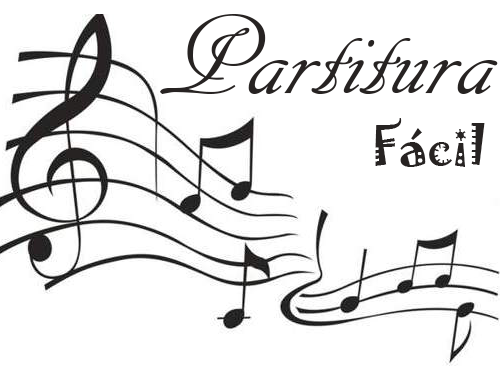
<style>
.page{position:relative;width:500px;height:368px;background:#ffffff}
.page>*{position:absolute;margin:0}
.t1{font:120px "ARDECODE";color:#272322}
.t2{font:50px "Jokerman-Regular";color:#272322}
</style>
<div class="page">
<p class="t1" style="left:160px;top:14px;width:338px;height:80px">Partitura</p>
<p class="t2" style="left:375px;top:118px;width:110px;height:49px">Fácil</p>
</div>
